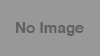
<style>
.page{position:relative;width:100px;height:56px;background:#989898}
.page>*{position:absolute;margin:0}
.t1{font:15.3px "Helvetica-Bold";color:#616161}
</style>
<div class="page">
<p class="t1" style="left:16px;top:22px;width:68px;height:14px">No Image</p>
</div>
